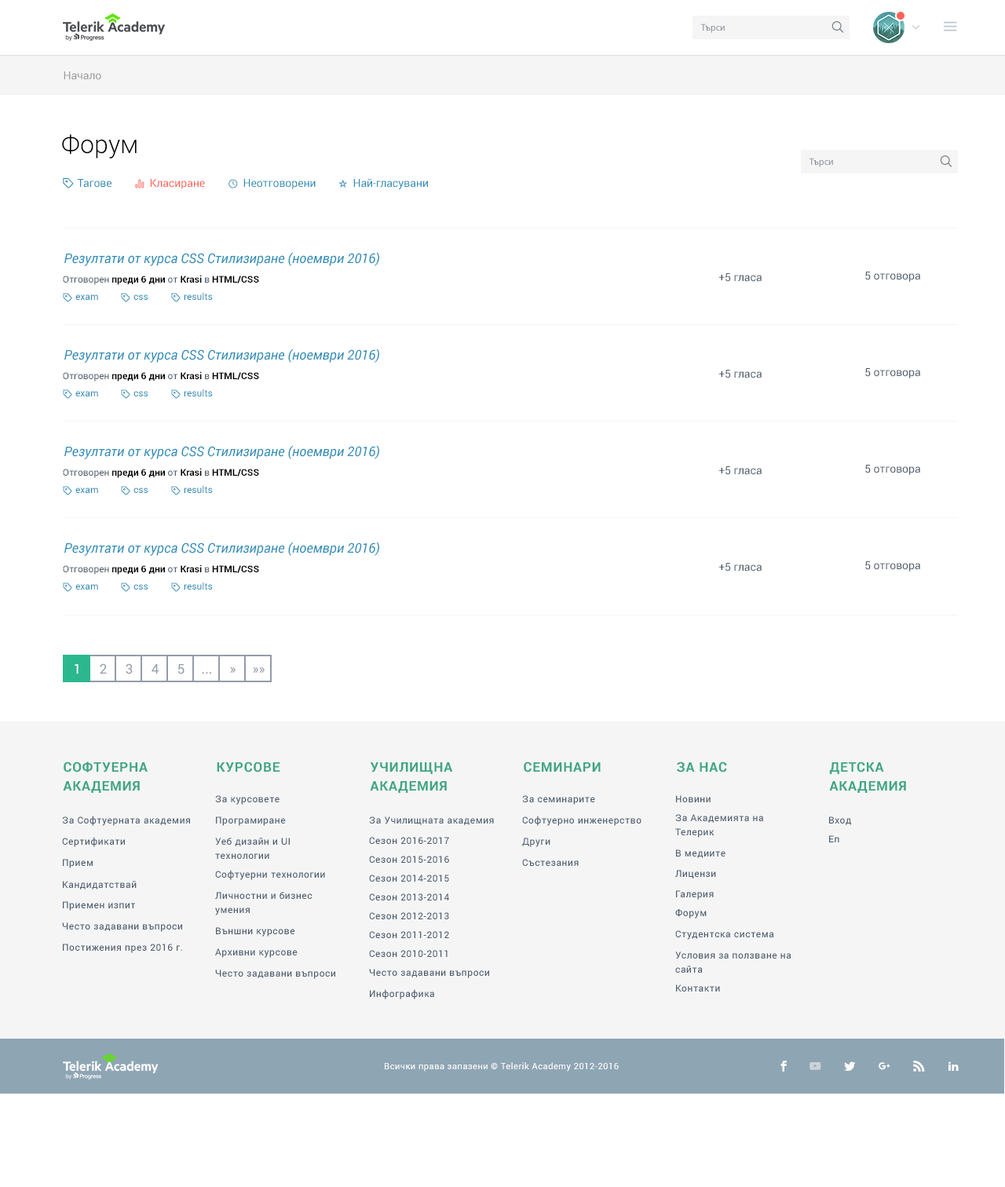
<style>
.page{position:relative;width:1005px;height:1187px;background:#ffffff}
.page>*{position:absolute;margin:0}
.t1{font:9.4px "MyriadPro-Regular";color:#7b848e}
.t2{font:11px "Roboto-Regular";color:#9c9c9d}
.t3{font:25.1px "Roboto-Light";color:#000000}
.t4{font:11px "Roboto-Regular";color:#2f8eb8}
.t5{font:11px "Roboto-Regular";color:#ff6358}
.t6{font:13.3px "Roboto-Italic";color:#2f8eb8}
.t7{font:9.4px "Roboto-Bold";color:#000000}
.t8{font:9.4px "Roboto-Regular";color:#4f5d6c}
.t9{font:11px "Roboto-Regular";color:#4f5d6c}
.t10{font:9.4px "Roboto-Regular";color:#2f8eb8}
.t11{font:13.3px "Roboto-Regular";color:#ffffff;text-transform:uppercase}
.t12{font:13.3px "Roboto-Regular";color:#939ca8;text-transform:uppercase}
.t13{font:13.3px/18.8px "Roboto-Bold";letter-spacing:0.05em;color:#41a580;text-transform:uppercase}
.t14{font:13.3px "Roboto-Bold";letter-spacing:0.05em;color:#41a580;text-transform:uppercase}
.t15{font:9.4px "Roboto-Regular";letter-spacing:0.05em;color:#4f5d6c}
.t16{font:9.4px/14.1px "Roboto-Regular";letter-spacing:0.05em;color:#4f5d6c}
.t17{font:8.6px "Roboto-Regular";letter-spacing:0.05em;color:#ffffff}
</style>
<div class="page">
<p class="t1" style="left:700px;top:24px;width:24px;height:9px">Търси</p>
<p class="t2" style="left:64px;top:71px;width:37px;height:9px">Начало</p>
<p class="t3" style="left:62px;top:134px;width:75px;height:25px">Форум</p>
<p class="t1" style="left:808px;top:158px;width:25px;height:9px">Търси</p>
<p class="t4" style="left:77px;top:179px;width:34px;height:9px">Тагове</p>
<p class="t5" style="left:150px;top:179px;width:55px;height:10px">Класиране</p>
<p class="t4" style="left:243px;top:179px;width:73px;height:10px">Неотговорени</p>
<p class="t4" style="left:353px;top:178px;width:75px;height:11px">Най-гласувани</p>
<p class="t6" style="left:64px;top:252px;width:315px;height:14px">Резултати от курса CSS Стилизиране (ноември 2016)</p>
<p class="t7" style="left:63px;top:275px;width:196px;height:10px"><span class="t8">Отговорен </span>преди 6 дни<span class="t8"> от </span>Krasi<span class="t8"> в </span>HTML/CSS</p>
<p class="t9" style="left:718px;top:273px;width:43px;height:9px">+5 гласа</p>
<p class="t9" style="left:865px;top:272px;width:55px;height:10px">5 отговора</p>
<p class="t10" style="left:184px;top:292px;width:29px;height:8px">results</p>
<p class="t10" style="left:75px;top:294px;width:23px;height:6px">exam</p>
<p class="t10" style="left:133px;top:294px;width:15px;height:6px">css</p>
<p class="t6" style="left:64px;top:349px;width:315px;height:14px">Резултати от курса CSS Стилизиране (ноември 2016)</p>
<p class="t7" style="left:63px;top:371px;width:196px;height:10px"><span class="t8">Отговорен </span>преди 6 дни<span class="t8"> от </span>Krasi<span class="t8"> в </span>HTML/CSS</p>
<p class="t9" style="left:718px;top:370px;width:43px;height:8px">+5 гласа</p>
<p class="t9" style="left:865px;top:368px;width:55px;height:10px">5 отговора</p>
<p class="t10" style="left:184px;top:389px;width:29px;height:7px">results</p>
<p class="t10" style="left:75px;top:391px;width:23px;height:5px">exam</p>
<p class="t10" style="left:133px;top:391px;width:15px;height:5px">css</p>
<p class="t6" style="left:64px;top:445px;width:315px;height:14px">Резултати от курса CSS Стилизиране (ноември 2016)</p>
<p class="t7" style="left:63px;top:468px;width:196px;height:10px"><span class="t8">Отговорен </span>преди 6 дни<span class="t8"> от </span>Krasi<span class="t8"> в </span>HTML/CSS</p>
<p class="t9" style="left:718px;top:466px;width:43px;height:9px">+5 гласа</p>
<p class="t9" style="left:865px;top:465px;width:55px;height:10px">5 отговора</p>
<p class="t10" style="left:184px;top:485px;width:29px;height:8px">results</p>
<p class="t10" style="left:75px;top:487px;width:23px;height:6px">exam</p>
<p class="t10" style="left:133px;top:487px;width:15px;height:6px">css</p>
<p class="t6" style="left:64px;top:542px;width:315px;height:14px">Резултати от курса CSS Стилизиране (ноември 2016)</p>
<p class="t7" style="left:63px;top:564px;width:196px;height:11px"><span class="t8">Отговорен </span>преди 6 дни<span class="t8"> от </span>Krasi<span class="t8"> в </span>HTML/CSS</p>
<p class="t9" style="left:718px;top:563px;width:43px;height:8px">+5 гласа</p>
<p class="t9" style="left:865px;top:561px;width:55px;height:10px">5 отговора</p>
<p class="t10" style="left:184px;top:582px;width:29px;height:7px">results</p>
<p class="t10" style="left:75px;top:584px;width:23px;height:5px">exam</p>
<p class="t10" style="left:133px;top:584px;width:15px;height:5px">css</p>
<p class="t11" style="left:75px;top:664px;width:3px;height:9px">1</p>
<p class="t12" style="left:100px;top:663px;width:7px;height:10px">2</p>
<p class="t12" style="left:126px;top:663px;width:7px;height:11px">3</p>
<p class="t12" style="left:151px;top:664px;width:8px;height:9px">4</p>
<p class="t12" style="left:178px;top:664px;width:6px;height:10px">5</p>
<p class="t12" style="left:202px;top:672px;width:9px;height:1px">...</p>
<p class="t12" style="left:230px;top:667px;width:5px;height:6px">»</p>
<p class="t12" style="left:253px;top:667px;width:12px;height:6px">»»</p>
<p class="t13" style="left:63px;top:761px;width:85px;height:32px">Софтуерна <br>академия</p>
<p class="t14" style="left:217px;top:761px;width:63px;height:11px">Kурсове</p>
<p class="t14" style="left:524px;top:761px;width:76px;height:11px">Семинари</p>
<p class="t14" style="left:677px;top:761px;width:50px;height:11px">За нас</p>
<p class="t13" style="left:829px;top:761px;width:77px;height:32px">Детска <br>академия</p>
<p class="t13" style="left:370px;top:762px;width:83px;height:31px">Училищна <br>академия</p>
<p class="t15" style="left:215px;top:795px;width:64px;height:10px">За курсовете</p>
<p class="t15" style="left:522px;top:795px;width:73px;height:10px">За семинарите</p>
<p class="t15" style="left:676px;top:795px;width:34px;height:7px">Новини</p>
<p class="t15" style="left:62px;top:816px;width:128px;height:10px">За Софтуерната академия</p>
<p class="t15" style="left:216px;top:816px;width:70px;height:10px">Програмиране</p>
<p class="t15" style="left:369px;top:816px;width:125px;height:9px">За Училищната академия</p>
<p class="t15" style="left:522px;top:816px;width:119px;height:10px">Софтуерно инженерство</p>
<p class="t16" style="left:675px;top:814px;width:88px;height:24px">За Академията на <br>Телерик</p>
<p class="t15" style="left:829px;top:816px;width:22px;height:9px">Вход</p>
<p class="t15" style="left:62px;top:837px;width:63px;height:10px">Сертификати</p>
<p class="t16" style="left:215px;top:838px;width:75px;height:21px">Уеб дизайн и UI <br>технологии</p>
<p class="t15" style="left:369px;top:837px;width:80px;height:7px">Сезон 2016-2017</p>
<p class="t15" style="left:522px;top:838px;width:28px;height:9px">Други</p>
<p class="t15" style="left:829px;top:835px;width:10px;height:7px">En</p>
<p class="t15" style="left:369px;top:856px;width:80px;height:7px">Сезон 2015-2016</p>
<p class="t15" style="left:676px;top:849px;width:49px;height:9px">В медиите</p>
<p class="t15" style="left:63px;top:859px;width:30px;height:9px">Прием</p>
<p class="t15" style="left:215px;top:870px;width:110px;height:10px">Софтуерни технологии</p>
<p class="t15" style="left:522px;top:859px;width:57px;height:7px">Състезания</p>
<p class="t15" style="left:675px;top:870px;width:41px;height:8px">Лицензи</p>
<p class="t15" style="left:63px;top:881px;width:74px;height:8px">Кандидатствай</p>
<p class="t15" style="left:369px;top:874px;width:80px;height:7px">Сезон 2014-2015</p>
<p class="t16" style="left:215px;top:892px;width:97px;height:23px">Личностни и бизнес <br>умения</p>
<p class="t15" style="left:369px;top:893px;width:80px;height:7px">Сезон 2013-2014</p>
<p class="t15" style="left:676px;top:890px;width:38px;height:10px">Галерия</p>
<p class="t15" style="left:63px;top:901px;width:72px;height:10px">Приемен изпит</p>
<p class="t15" style="left:369px;top:912px;width:80px;height:7px">Сезон 2012-2013</p>
<p class="t15" style="left:675px;top:909px;width:31px;height:9px">Форум</p>
<p class="t15" style="left:62px;top:922px;width:120px;height:10px">Често задавани въпроси</p>
<p class="t15" style="left:216px;top:927px;width:79px;height:9px">Външни курсове</p>
<p class="t15" style="left:369px;top:931px;width:80px;height:7px">Сезон 2011-2012</p>
<p class="t15" style="left:675px;top:930px;width:99px;height:10px">Студентска система</p>
<p class="t15" style="left:63px;top:943px;width:119px;height:10px">Постижения през 2016 г.</p>
<p class="t15" style="left:215px;top:948px;width:82px;height:10px">Архивни курсове</p>
<p class="t15" style="left:369px;top:950px;width:78px;height:7px">Сезон 2010-2011</p>
<p class="t16" style="left:675px;top:951px;width:116px;height:22px">Условия за ползване на <br>сайта</p>
<p class="t15" style="left:215px;top:969px;width:120px;height:10px">Често задавани въпроси</p>
<p class="t15" style="left:369px;top:969px;width:120px;height:9px">Често задавани въпроси</p>
<p class="t15" style="left:370px;top:989px;width:64px;height:10px">Инфографика</p>
<p class="t15" style="left:676px;top:984px;width:44px;height:7px">Контакти</p>
<p class="t17" style="left:385px;top:1062px;width:234px;height:9px">Всички права запазени © Telerik Academy 2012-2016</p>
</div>
